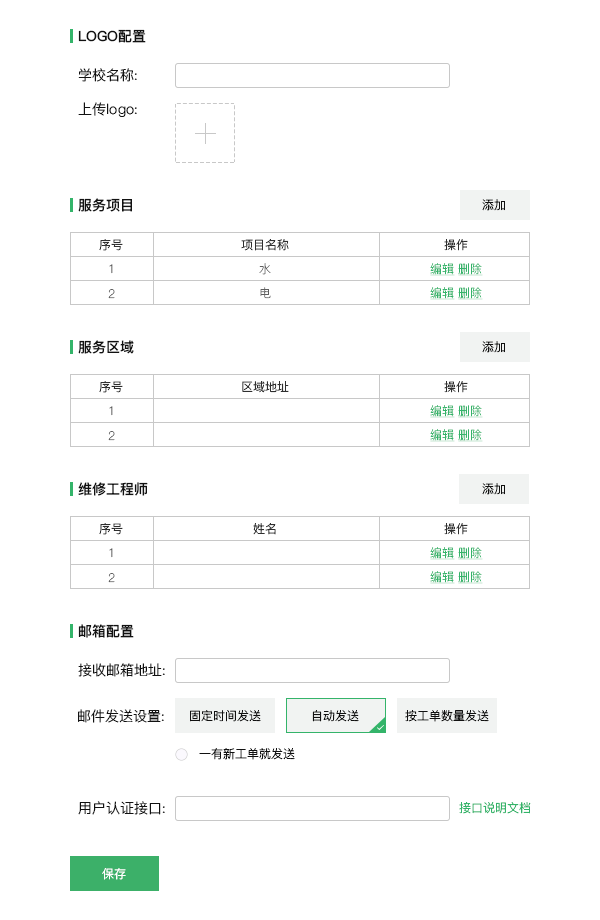
<style>
.page{position:relative;width:600px;height:920px;background:#ffffff}
.page>*{position:absolute;margin:0}
.t1{font:14px "PingFangSC-Medium";color:#111111}
.t2{font:14px "PingFangSC-Light";color:#111111}
.t3{font:12px "PingFangSC-Light";color:#111111}
.t4{font:12px "PingFangSC-Light";color:#2f2f2f}
.t5{font:12px "PingFangSC-Thin";color:#5f5f5f}
.t6{font:12px "PingFangSC-Thin";color:#35b36a;text-decoration:underline}
.t7{font:12px "PingFangSC-Light";color:#34b46a}
.t8{font:12px "PingFangSC-Light";color:#ffffff}
</style>
<div class="page">
<p class="t1" style="left:78px;top:29px;width:68px;height:14px">LOGO配置</p>
<p class="t2" style="left:78px;top:68px;width:59px;height:14px">学校名称:</p>
<p class="t2" style="left:78px;top:102px;width:59px;height:15px">上传logo:</p>
<p class="t1" style="left:78px;top:198px;width:54px;height:14px">服务项目</p>
<p class="t3" style="left:482px;top:199px;width:23px;height:12px">添加</p>
<p class="t4" style="left:99px;top:239px;width:24px;height:12px">序号</p>
<p class="t4" style="left:241px;top:239px;width:48px;height:12px">项目名称</p>
<p class="t4" style="left:444px;top:239px;width:24px;height:12px">操作</p>
<p class="t5" style="left:109px;top:264px;width:4px;height:10px">1</p>
<p class="t5" style="left:259px;top:263px;width:12px;height:12px">水</p>
<p class="t6" style="left:430px;top:263px;width:53px;height:13px">编辑 删除</p>
<p class="t5" style="left:108px;top:289px;width:7px;height:10px">2</p>
<p class="t5" style="left:260px;top:287px;width:11px;height:12px">电</p>
<p class="t6" style="left:430px;top:287px;width:53px;height:13px">编辑 删除</p>
<p class="t1" style="left:78px;top:340px;width:56px;height:14px">服务区域</p>
<p class="t3" style="left:482px;top:341px;width:23px;height:12px">添加</p>
<p class="t4" style="left:99px;top:381px;width:24px;height:12px">序号</p>
<p class="t4" style="left:242px;top:381px;width:47px;height:12px">区域地址</p>
<p class="t4" style="left:444px;top:381px;width:24px;height:12px">操作</p>
<p class="t5" style="left:109px;top:406px;width:4px;height:10px">1</p>
<p class="t6" style="left:430px;top:405px;width:53px;height:13px">编辑 删除</p>
<p class="t5" style="left:108px;top:431px;width:7px;height:10px">2</p>
<p class="t6" style="left:430px;top:429px;width:53px;height:13px">编辑 删除</p>
<p class="t1" style="left:78px;top:482px;width:70px;height:14px">维修工程师</p>
<p class="t3" style="left:482px;top:483px;width:23px;height:12px">添加</p>
<p class="t4" style="left:99px;top:523px;width:24px;height:12px">序号</p>
<p class="t4" style="left:253px;top:523px;width:23px;height:12px">姓名</p>
<p class="t4" style="left:444px;top:523px;width:24px;height:12px">操作</p>
<p class="t5" style="left:109px;top:548px;width:4px;height:10px">1</p>
<p class="t6" style="left:430px;top:547px;width:53px;height:13px">编辑 删除</p>
<p class="t5" style="left:108px;top:573px;width:7px;height:10px">2</p>
<p class="t6" style="left:430px;top:571px;width:53px;height:13px">编辑 删除</p>
<p class="t1" style="left:78px;top:624px;width:56px;height:14px">邮箱配置</p>
<p class="t2" style="left:78px;top:663px;width:87px;height:14px">接收邮箱地址:</p>
<p class="t2" style="left:78px;top:709px;width:86px;height:14px">邮件发送设置:</p>
<p class="t3" style="left:190px;top:710px;width:71px;height:12px">固定时间发送</p>
<p class="t3" style="left:312px;top:710px;width:47px;height:12px">自动发送</p>
<p class="t3" style="left:405px;top:710px;width:84px;height:12px">按工单数量发送</p>
<p class="t3" style="left:199px;top:748px;width:96px;height:12px">一有新工单就发送</p>
<p class="t2" style="left:78px;top:801px;width:87px;height:14px">用户认证接口:</p>
<p class="t7" style="left:459px;top:802px;width:72px;height:12px">接口说明文档</p>
<p class="t8" style="left:102px;top:868px;width:24px;height:12px">保存</p>
</div>
